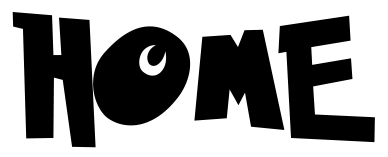
<style>
.page{position:relative;width:388px;height:157px;background:#ffffff}
.page>*{position:absolute;margin:0}
.t1{font:116.7px "PokemonSolidNormal";letter-spacing:0.08em;color:#000000}
</style>
<div class="page">
<p class="t1" style="left:12px;top:12px;width:363px;height:136px">HOME</p>
</div>
